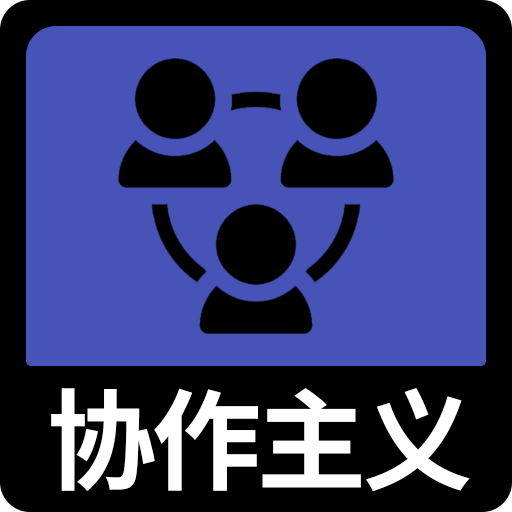
<style>
.page{position:relative;width:512px;height:512px;background:#4753b6}
.page>*{position:absolute;margin:0}
.t1{font:109px "NotoSansSC-Bold";letter-spacing:-0.034em;color:#ffffff}
</style>
<div class="page">
<p class="t1" style="left:51px;top:388px;width:419px;height:104px">协作主义</p>
</div>
